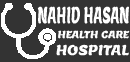
<style>
.page{position:relative;width:130px;height:62px;background:#333333}
.page>*{position:absolute;margin:0}
.t1{font:22.6px "Lemon-Regular";color:#ffffff;scale:0.53 1}
.t2{font:10px "Lemon-Regular";color:#ffffff}
.t3{font:14px "Lemon-Regular";color:#ffffff}
</style>
<div class="page">
<p class="t1" style="left:37px;top:6px;width:92px;height:18px">NAHID HASAN</p>
<p class="t2" style="left:58px;top:30px;width:72px;height:9px">HEALTH CARE</p>
<p class="t3" style="left:56px;top:44px;width:73px;height:12px">HOSPITAL</p>
</div>
